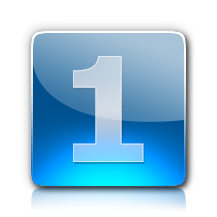
<style>
.page{position:relative;width:217px;height:217px;background:#ffffff}
.page>*{position:absolute;margin:0}
.t1{font:145.8px "Verdana-Bold";text-transform:uppercase}
</style>
<div class="page">
<p class="t1" style="left:72px;top:56px;width:72px;height:106px">1</p>
</div>
